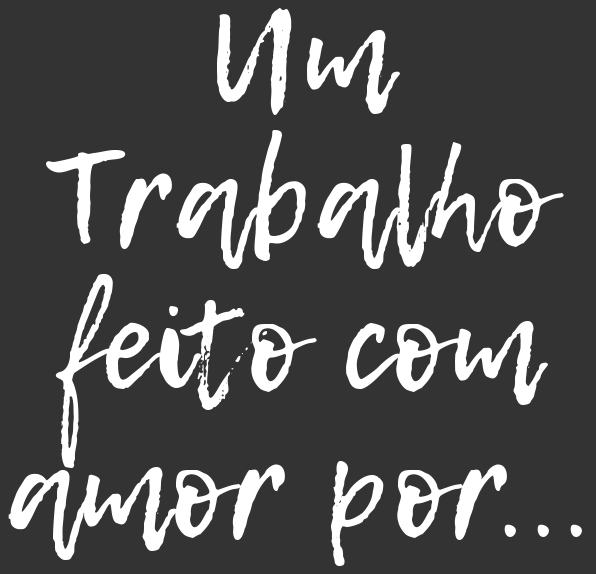
<style>
.page{position:relative;width:596px;height:574px;background:#333333}
.page>*{position:absolute;margin:0}
.t1{font:128.4px/145.5px "LemonTuesday";letter-spacing:0.02em;color:#ffffff}
</style>
<div class="page">
<p class="t1" style="left:8px;top:8px;width:574px;height:558px;text-align:center">Um<br>Trabalho<br>feito com<br>amor por...</p>
</div>
